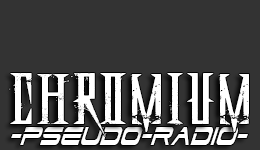
<style>
.page{position:relative;width:260px;height:150px;background:#333333}
.page>*{position:absolute;margin:0}
.t1{font:66.9px "DeadlyBlackChainExtended";color:#ffffff;scale:1.21 1}
.t2{font:31.6px "DodgerCondensedItalic";color:#ffffff;scale:0.75 1}
</style>
<div class="page">
<p class="t1" style="left:9px;top:73px;width:240px;height:63px">chromium</p>
<p class="t2" style="left:11px;top:127px;width:237px;height:18px">-pseudo-RADIO-</p>
</div>
